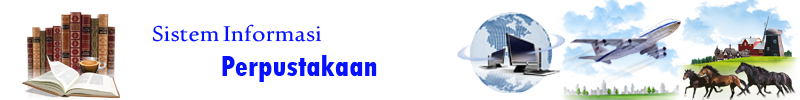
<style>
.page{position:relative;width:800px;height:100px;background:#ffffff}
.page>*{position:absolute;margin:0}
.t1{font:24.3px "UrduTypesetting";color:#0612ff}
.t2{font:30px "TwCenMT-CondensedExtraBold";color:#0612ff}
</style>
<div class="page">
<p class="t1" style="left:152px;top:24px;width:169px;height:18px">Sistem Informasi</p>
<p class="t2" style="left:222px;top:55px;width:155px;height:27px">Perpustakaan</p>
</div>
